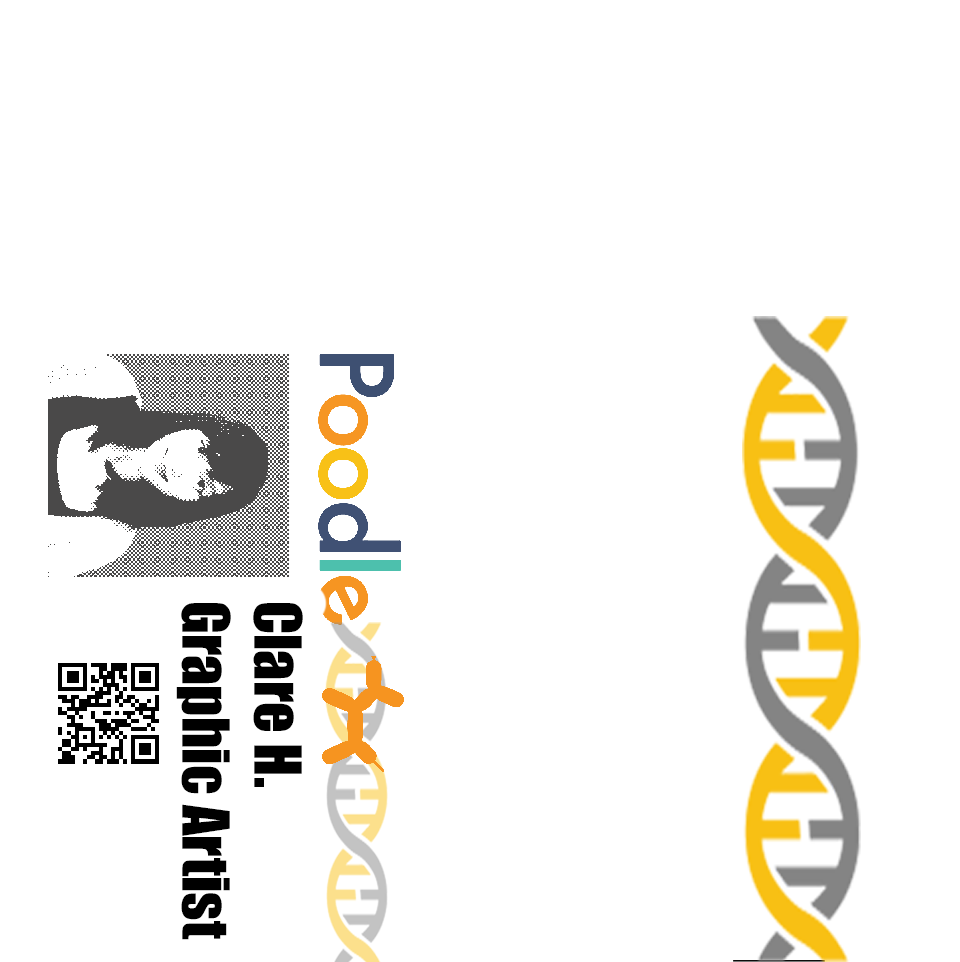
<style>
.page{position:relative;width:960px;height:962px;background:#ffffff}
.page>*{position:absolute;margin:0}
.t1{font:60px "Impact";color:#000000}
</style>
<div class="page">
<p class="t1" style="left:176px;top:603px;width:127px;height:337px;rotate:90deg">Clare H.<br>Graphic Artist</p>
</div>
